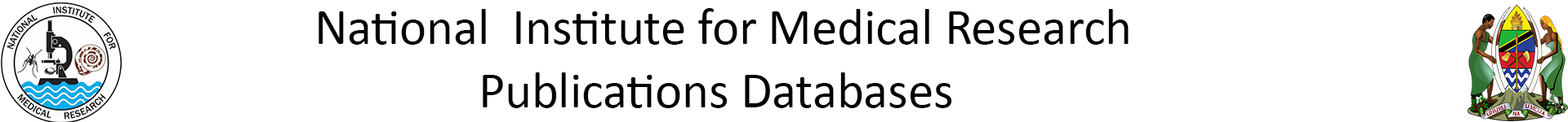
<style>
.page{position:relative;width:1568px;height:122px;background:#ffffff}
.page>*{position:absolute;margin:0}
.t1{font:51px "Calibri";color:#000102}
.t2{font:51px "Calibri";color:#000101}
</style>
<div class="page">
<p class="t1" style="left:318px;top:8px;width:811px;height:37px">National  Institute for Medical Research</p>
<p class="t2" style="left:483px;top:73px;width:469px;height:36px">Publications Databases</p>
</div>
